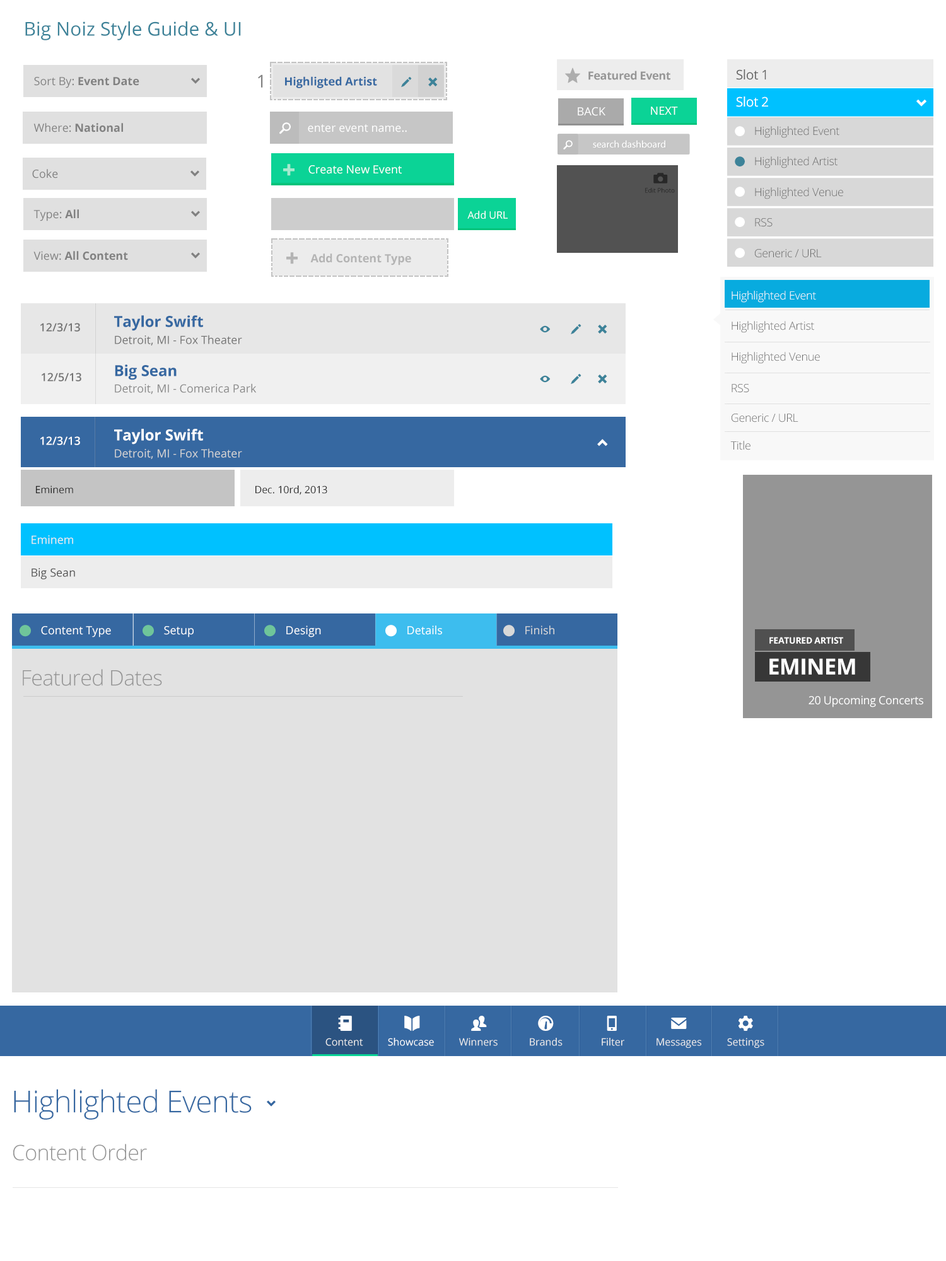
<style>
.page{position:relative;width:946px;height:1261px;background:#ffffff}
.page>*{position:absolute;margin:0}
.t1{font:18.9px "OpenSans";color:#3d8399}
.t2{font:11.3px "OpenSans-Bold";color:#818181}
.t3{font:11.3px "OpenSans";color:#818181}
.t4{font:8.8px "SSStandard";color:#818181}
.t5{font:17.7px "OpenSans";color:#818181}
.t6{font:11.3px "OpenSans-Bold";color:#3668a1}
.t7{font:10.1px "SSStandard";color:#3d8399}
.t8{font:15.1px "SSStandard";letter-spacing:-0.02em;color:#adadad}
.t9{font:11.3px "OpenSans-Bold";letter-spacing:-0.02em;color:#969696}
.t10{font:13.2px "OpenSans";letter-spacing:-0.02em;color:#656565}
.t11{font:13.2px "OpenSans";letter-spacing:-0.02em;color:#ffffff}
.t12{font:9.9px "SSStandard";color:#ffffff}
.t13{font:11.3px "OpenSans";color:#ffffff}
.t14{font:11.3px "SSStandard";color:#ffffff}
.t15{font:11.3px "OpenSans-Light";letter-spacing:-0.02em;color:#696969}
.t16{font:9.1px "SSStandard";color:#ffffff}
.t17{font:9.9px "MyriadPro-Regular";color:#ffffff}
.t18{font:9.9px "SSStandard";color:#3d8399}
.t19{font:11.3px "SSStandard";color:#a5eacf}
.t20{font:13.9px "SSStandard";color:#282828}
.t21{font:6.3px "OpenSans";color:#282828}
.t22{font:10.1px "OpenSans";color:#ffffff}
.t23{font:11.3px "SSStandard";color:#b4b4b4}
.t24{font:11.3px "OpenSans-Bold";color:#b4b4b4}
.t25{font:11.3px "OpenSans-Light";letter-spacing:-0.02em;color:#ffffff}
.t26{font:15.1px "OpenSans-Bold";color:#3668a1}
.t27{font:12.2px "SSStandard";color:#f8f8f8}
.t28{font:11.3px "OpenSans-Semibold";color:#737373}
.t29{font:11.3px "OpenSans";color:#898989}
.t30{font:11.3px "OpenSans-Semibold";color:#ffffff}
.t31{font:15.1px "OpenSans-Bold";color:#ffffff}
.t32{font:11.3px "OpenSans";color:#d4d4d4}
.t33{font:10.1px "SSStandard";color:#ffffff}
.t34{font:10.1px "OpenSans";color:#282828}
.t35{font:11.3px "OpenSans";color:#ececec}
.t36{font:11.3px "OpenSans";color:#525252}
.t37{font:11.3px "SSStandard";color:#6fc59a}
.t38{font:11.3px "SSStandard";color:#d8d8d8}
.t39{font:11.3px "OpenSans";color:#d8d8d8}
.t40{font:8.8px "OpenSans-Bold";letter-spacing:-0.02em;color:#ffffff}
.t41{font:22.1px "OpenSans-Bold";letter-spacing:-0.02em;color:#ffffff}
.t42{font:21.4px "OpenSans-Light";letter-spacing:-0.02em;color:#959595}
.t43{font:11.3px "OpenSans";letter-spacing:-0.02em;color:#ffffff}
.t44{font:15.1px "SSStandard";color:#ffffff}
.t45{font:10.1px "OpenSans";color:#ececec}
.t46{font:30.3px "OpenSans-Light";letter-spacing:-0.02em;color:#3668a1}
.t47{font:8.8px "SSStandard";color:#3668a1}
</style>
<div class="page">
<p class="t1" style="left:25px;top:21px;width:216px;height:19px">Big Noiz Style Guide &amp; UI</p>
<p class="t2" style="left:34px;top:77px;width:105px;height:11px"><span class="t3">Sort By: </span>Event Date</p>
<p class="t4" style="left:191px;top:78px;width:9px;height:6px">navigatedown</p>
<p class="t5" style="left:258px;top:74px;width:5px;height:14px">1</p>
<p class="t6" style="left:285px;top:76px;width:92px;height:12px">Highligted Artist</p>
<p class="t7" style="left:401px;top:77px;width:11px;height:10px">edit</p>
<p class="t7" style="left:428px;top:78px;width:10px;height:8px">delete</p>
<p class="t8" style="left:565px;top:67px;width:15px;height:16px">favorite</p>
<p class="t9" style="left:588px;top:71px;width:82px;height:9px">Featured Event</p>
<p class="t10" style="left:736px;top:69px;width:30px;height:11px">Slot 1</p>
<p class="t11" style="left:736px;top:96px;width:32px;height:11px">Slot 2</p>
<p class="t12" style="left:916px;top:100px;width:10px;height:7px">navigatedown</p>
<p class="t13" style="left:577px;top:107px;width:28px;height:9px">BACK</p>
<p class="t13" style="left:651px;top:107px;width:27px;height:8px">NEXT</p>
<p class="t2" style="left:33px;top:123px;width:90px;height:9px"><span class="t3">Where: </span>National</p>
<p class="t14" style="left:279px;top:122px;width:12px;height:12px">search</p>
<p class="t13" style="left:308px;top:124px;width:99px;height:8px">enter event name..</p>
<p class="t12" style="left:734px;top:126px;width:11px;height:10px">record</p>
<p class="t15" style="left:755px;top:126px;width:84px;height:12px">Highlighted Event</p>
<p class="t16" style="left:563px;top:140px;width:9px;height:9px">search</p>
<p class="t17" style="left:593px;top:140px;width:72px;height:8px">search dashboard</p>
<p class="t18" style="left:734px;top:156px;width:11px;height:10px">record</p>
<p class="t15" style="left:755px;top:156px;width:82px;height:12px">Highlighted Artist</p>
<p class="t3" style="left:32px;top:169px;width:26px;height:9px">Coke</p>
<p class="t4" style="left:190px;top:170px;width:9px;height:7px">navigatedown</p>
<p class="t19" style="left:283px;top:164px;width:11px;height:12px">add</p>
<p class="t13" style="left:308px;top:165px;width:94px;height:9px">Create New Event</p>
<p class="t20" style="left:653px;top:173px;width:15px;height:10px">camera</p>
<p class="t21" style="left:645px;top:188px;width:30px;height:5px">Edit Photo</p>
<p class="t12" style="left:734px;top:187px;width:11px;height:10px">record</p>
<p class="t15" style="left:755px;top:187px;width:88px;height:12px">Highlighted Venue</p>
<p class="t3" style="left:33px;top:209px;width:46px;height:12px">Type: <span class="t2">All</span></p>
<p class="t4" style="left:191px;top:211px;width:9px;height:6px">navigatedown</p>
<p class="t22" style="left:467px;top:211px;width:41px;height:8px">Add URL</p>
<p class="t12" style="left:734px;top:217px;width:11px;height:10px">record</p>
<p class="t15" style="left:755px;top:218px;width:17px;height:9px">RSS</p>
<p class="t2" style="left:33px;top:251px;width:95px;height:9px"><span class="t3">View: </span>All Content</p>
<p class="t4" style="left:191px;top:252px;width:9px;height:6px">navigatedown</p>
<p class="t23" style="left:286px;top:252px;width:12px;height:12px">add</p>
<p class="t24" style="left:310px;top:253px;width:101px;height:12px">Add Content Type</p>
<p class="t12" style="left:734px;top:248px;width:11px;height:10px">record</p>
<p class="t15" style="left:755px;top:249px;width:66px;height:9px">Generic / URL</p>
<p class="t25" style="left:731px;top:291px;width:85px;height:12px">Highlighted Event</p>
<p class="t26" style="left:114px;top:315px;width:89px;height:16px">Taylor Swift</p>
<p class="t27" style="left:713px;top:313px;width:8px;height:13px">directleft</p>
<p class="t28" style="left:40px;top:323px;width:40px;height:9px">12/3/13</p>
<p class="t7" style="left:540px;top:325px;width:10px;height:8px">view</p>
<p class="t7" style="left:571px;top:324px;width:10px;height:10px">edit</p>
<p class="t7" style="left:598px;top:325px;width:9px;height:9px">delete</p>
<p class="t15" style="left:731px;top:321px;width:83px;height:12px">Highlighted Artist</p>
<p class="t29" style="left:115px;top:335px;width:127px;height:10px">Detroit, MI - Fox Theater</p>
<p class="t15" style="left:731px;top:352px;width:89px;height:12px">Highlighted Venue</p>
<p class="t26" style="left:115px;top:364px;width:62px;height:16px">Big Sean</p>
<p class="t28" style="left:42px;top:373px;width:39px;height:8px">12/5/13</p>
<p class="t7" style="left:540px;top:375px;width:10px;height:8px">view</p>
<p class="t7" style="left:571px;top:374px;width:10px;height:10px">edit</p>
<p class="t7" style="left:598px;top:374px;width:9px;height:9px">delete</p>
<p class="t29" style="left:115px;top:383px;width:142px;height:11px">Detroit, MI - Comerica Park</p>
<p class="t15" style="left:731px;top:384px;width:18px;height:9px">RSS</p>
<p class="t15" style="left:731px;top:414px;width:67px;height:8px">Generic / URL</p>
<p class="t30" style="left:40px;top:436px;width:40px;height:9px">12/3/13</p>
<p class="t31" style="left:114px;top:429px;width:89px;height:15px">Taylor Swift</p>
<p class="t32" style="left:115px;top:448px;width:127px;height:11px">Detroit, MI - Fox Theater</p>
<p class="t33" style="left:597px;top:439px;width:11px;height:7px">navigateup</p>
<p class="t15" style="left:730px;top:441px;width:20px;height:9px">Title</p>
<p class="t34" style="left:36px;top:485px;width:37px;height:9px">Eminem</p>
<p class="t34" style="left:255px;top:485px;width:72px;height:10px">Dec. 10rd, 2013</p>
<p class="t35" style="left:32px;top:535px;width:41px;height:9px">Eminem</p>
<p class="t36" style="left:32px;top:568px;width:43px;height:11px">Big Sean</p>
<p class="t37" style="left:20px;top:625px;width:11px;height:12px">record</p>
<p class="t13" style="left:41px;top:626px;width:70px;height:11px">Content Type</p>
<p class="t37" style="left:142px;top:625px;width:12px;height:12px">record</p>
<p class="t13" style="left:164px;top:626px;width:30px;height:11px">Setup</p>
<p class="t37" style="left:264px;top:625px;width:12px;height:12px">record</p>
<p class="t13" style="left:286px;top:625px;width:35px;height:12px">Design</p>
<p class="t14" style="left:385px;top:625px;width:12px;height:12px">record</p>
<p class="t13" style="left:407px;top:625px;width:35px;height:10px">Details</p>
<p class="t38" style="left:503px;top:625px;width:11px;height:12px">record</p>
<p class="t39" style="left:525px;top:625px;width:29px;height:10px">Finish</p>
<p class="t40" style="left:769px;top:637px;width:74px;height:7px">FEATURED ARTIST</p>
<p class="t41" style="left:769px;top:658px;width:86px;height:17px">EMINEM</p>
<p class="t42" style="left:23px;top:669px;width:139px;height:17px">Featured Dates</p>
<p class="t43" style="left:808px;top:695px;width:115px;height:12px">20 Upcoming Concerts</p>
<p class="t44" style="left:338px;top:1016px;width:14px;height:15px">notebook</p>
<p class="t44" style="left:404px;top:1016px;width:16px;height:15px">openbook</p>
<p class="t44" style="left:471px;top:1016px;width:16px;height:15px">users</p>
<p class="t44" style="left:538px;top:1016px;width:16px;height:15px">dashboard</p>
<p class="t44" style="left:607px;top:1016px;width:10px;height:15px">cell</p>
<p class="t44" style="left:671px;top:1018px;width:16px;height:11px">mail</p>
<p class="t44" style="left:738px;top:1016px;width:15px;height:15px">settings</p>
<p class="t45" style="left:325px;top:1038px;width:38px;height:8px">Content</p>
<p class="t45" style="left:388px;top:1038px;width:46px;height:8px">Showcase</p>
<p class="t45" style="left:459px;top:1038px;width:38px;height:8px">Winners</p>
<p class="t45" style="left:530px;top:1038px;width:32px;height:8px">Brands</p>
<p class="t45" style="left:601px;top:1038px;width:23px;height:8px">Filter</p>
<p class="t45" style="left:656px;top:1038px;width:45px;height:10px">Messages</p>
<p class="t45" style="left:727px;top:1038px;width:37px;height:10px">Settings</p>
<p class="t46" style="left:14px;top:1089px;width:238px;height:31px">Highlighted Events</p>
<p class="t47" style="left:267px;top:1100px;width:9px;height:6px">navigatedown</p>
<p class="t42" style="left:13px;top:1144px;width:134px;height:17px">Content Order</p>
</div>
